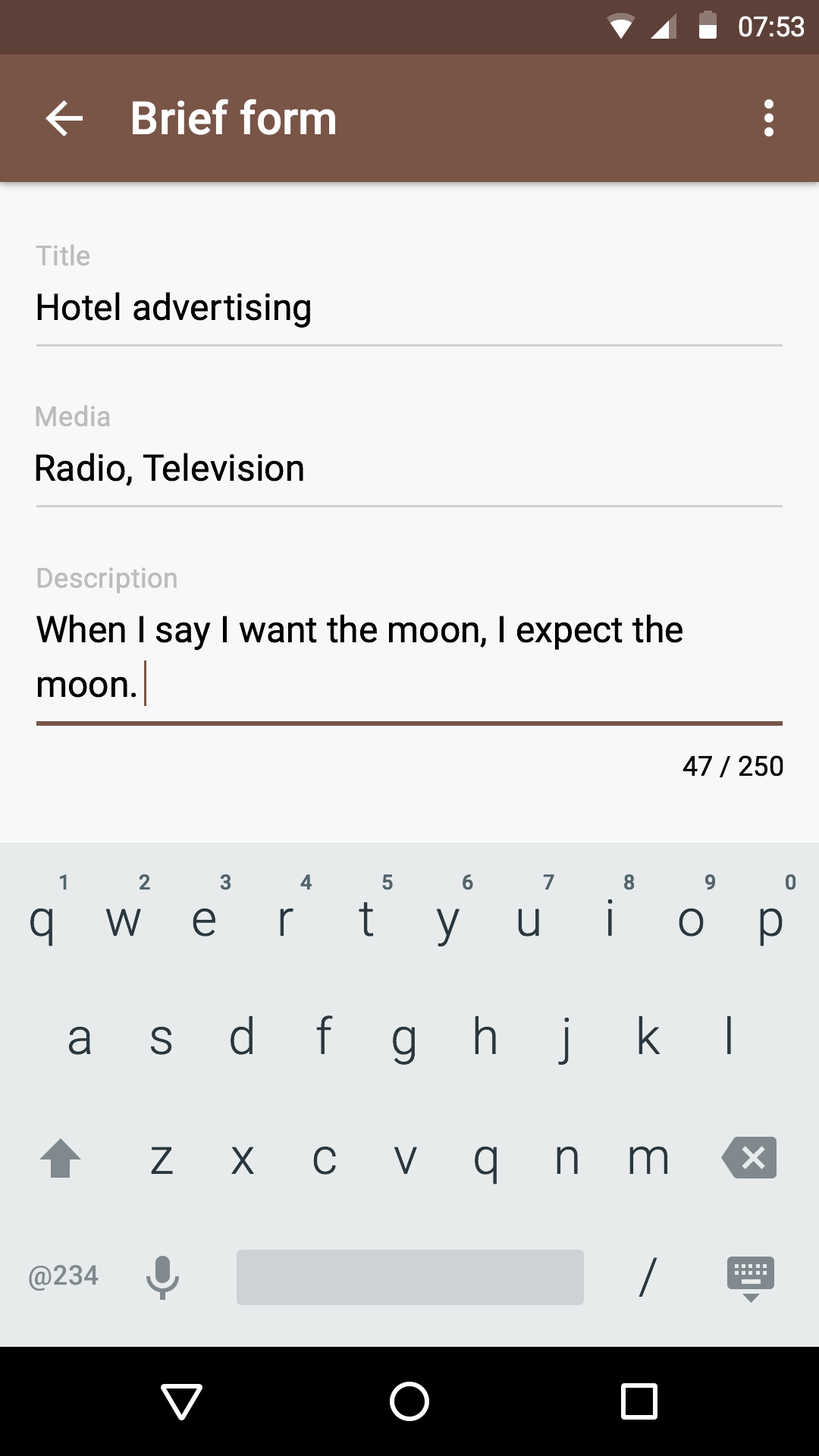
<style>
.page{position:relative;width:819px;height:1456px;background:#f8f8f8}
.page>*{position:absolute;margin:0}
.t1{font:27.3px "Roboto-Regular";color:#ffffff}
.t2{font:45.5px "Roboto-Medium";letter-spacing:0.005em;color:#ffffff}
.t3{font:27.3px "Roboto-Regular";letter-spacing:0.02em;color:#bcbcbc}
.t4{font:36.4px "Roboto-Regular";letter-spacing:0.01em;color:#000000}
.t5{font:36.4px/54.6px "Roboto-Regular";color:#000000}
.t6{font:27.3px "Roboto-Regular";color:#000000}
.t7{font:20.5px "Roboto-Medium";color:#53656d}
.t8{font:50px "Roboto-Light";color:#2a373e}
</style>
<div class="page">
<p class="t1" style="left:739px;top:16px;width:66px;height:21px">07:53</p>
<p class="t2" style="left:133px;top:99px;width:202px;height:36px">Brief form</p>
<p class="t3" style="left:36px;top:244px;width:54px;height:22px">Title</p>
<p class="t4" style="left:37px;top:292px;width:273px;height:36px">Hotel advertising</p>
<p class="t3" style="left:36px;top:405px;width:74px;height:22px">Media</p>
<p class="t4" style="left:36px;top:453px;width:267px;height:33px">Radio, Television</p>
<p class="t3" style="left:37px;top:567px;width:140px;height:27px">Description</p>
<p class="t5" style="left:36px;top:614px;width:646px;height:84px">When I say I want the moon, I expect the moon.</p>
<p class="t6" style="left:682px;top:755px;width:101px;height:23px">47 / 250</p>
<p class="t7" style="left:59px;top:874px;width:8px;height:16px">1</p>
<p class="t7" style="left:139px;top:874px;width:11px;height:16px">2</p>
<p class="t7" style="left:220px;top:874px;width:11px;height:16px">3</p>
<p class="t7" style="left:300px;top:874px;width:12px;height:16px">4</p>
<p class="t7" style="left:382px;top:874px;width:11px;height:16px">5</p>
<p class="t7" style="left:463px;top:874px;width:10px;height:16px">6</p>
<p class="t7" style="left:543px;top:874px;width:11px;height:16px">7</p>
<p class="t7" style="left:624px;top:874px;width:11px;height:16px">8</p>
<p class="t7" style="left:704px;top:874px;width:12px;height:16px">9</p>
<p class="t7" style="left:786px;top:874px;width:10px;height:16px">0</p>
<p class="t8" style="left:359px;top:902px;width:15px;height:35px">t</p>
<p class="t8" style="left:607px;top:899px;width:6px;height:37px">i</p>
<p class="t8" style="left:30px;top:908px;width:22px;height:38px">q</p>
<p class="t8" style="left:105px;top:908px;width:36px;height:28px">w</p>
<p class="t8" style="left:193px;top:908px;width:22px;height:29px">e</p>
<p class="t8" style="left:280px;top:908px;width:13px;height:28px">r</p>
<p class="t8" style="left:436px;top:908px;width:24px;height:39px">y</p>
<p class="t8" style="left:518px;top:908px;width:21px;height:29px">u</p>
<p class="t8" style="left:679px;top:908px;width:25px;height:29px">o</p>
<p class="t8" style="left:760px;top:908px;width:23px;height:38px">p</p>
<p class="t8" style="left:231px;top:1015px;width:22px;height:40px">d</p>
<p class="t8" style="left:316px;top:1015px;width:17px;height:39px">f</p>
<p class="t8" style="left:475px;top:1015px;width:21px;height:39px">h</p>
<p class="t8" style="left:558px;top:1017px;width:12px;height:48px">j</p>
<p class="t8" style="left:639px;top:1015px;width:21px;height:39px">k</p>
<p class="t8" style="left:727px;top:1015px;width:4px;height:39px">l</p>
<p class="t8" style="left:68px;top:1026px;width:23px;height:29px">a</p>
<p class="t8" style="left:150px;top:1026px;width:22px;height:29px">s</p>
<p class="t8" style="left:393px;top:1026px;width:22px;height:39px">g</p>
<p class="t8" style="left:313px;top:1146px;width:23px;height:29px">c</p>
<p class="t8" style="left:475px;top:1146px;width:22px;height:39px">q</p>
<p class="t8" style="left:557px;top:1146px;width:21px;height:28px">n</p>
<p class="t8" style="left:629px;top:1146px;width:39px;height:28px">m</p>
<p class="t8" style="left:151px;top:1147px;width:22px;height:27px">z</p>
<p class="t8" style="left:231px;top:1147px;width:23px;height:27px">x</p>
<p class="t8" style="left:394px;top:1147px;width:23px;height:27px">v</p>
<p class="t8" style="left:639px;top:1257px;width:18px;height:40px">/</p>
</div>
